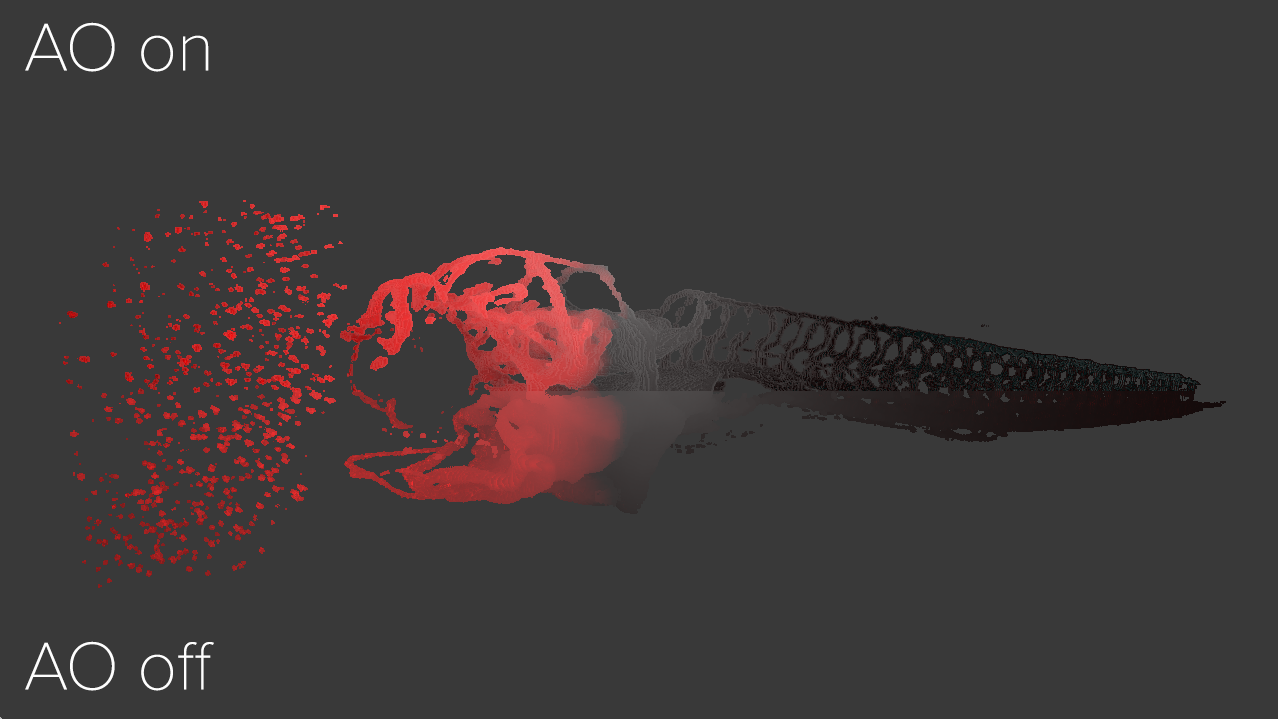
<style>
.page{position:relative;width:1278px;height:719px;background:#393939}
.page>*{position:absolute;margin:0}
.t1{font:120px "ProximaNovaT-Thin";color:#fefefe}
</style>
<div class="page">
<p class="t1" style="left:25px;top:22px;width:184px;height:50px">AO on</p>
<p class="t1" style="left:25px;top:641px;width:189px;height:50px">AO off</p>
</div>
